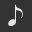
<style>
.page{position:relative;width:32px;height:32px;background:#333333}
.page>*{position:absolute;margin:0}
.t1{font:28.7px "ArialUnicodeMS";letter-spacing:-0.01em;color:#e4e6e5}
</style>
<div class="page">
<p class="t1" style="left:8px;top:4px;width:15px;height:22px">♪</p>
</div>
